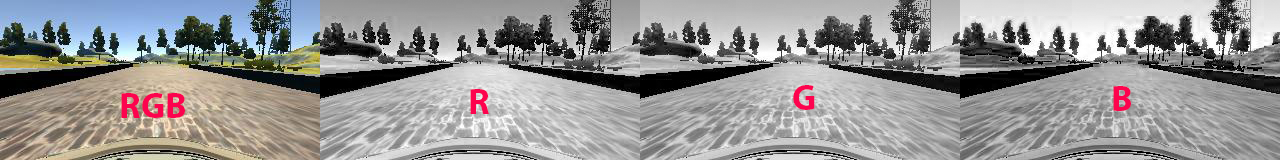
<style>
.page{position:relative;width:1280px;height:160px}
.page>*{position:absolute;margin:0}
.t1{font:36px "MyriadPro-Bold"}
.t2{font:36px "MyriadPro-Bold";color:#fd034e}
</style>
<div class="page">
<p class="t1" style="left:448px;top:87px;width:41px;height:25px">RR</p>
<p class="t2" style="left:470px;top:89px;width:19px;height:25px">R</p>
<p class="t2" style="left:793px;top:85px;width:22px;height:25px">G</p>
<p class="t2" style="left:1113px;top:86px;width:18px;height:25px">B</p>
<p class="t2" style="left:121px;top:93px;width:64px;height:25px">RGB</p>
</div>
